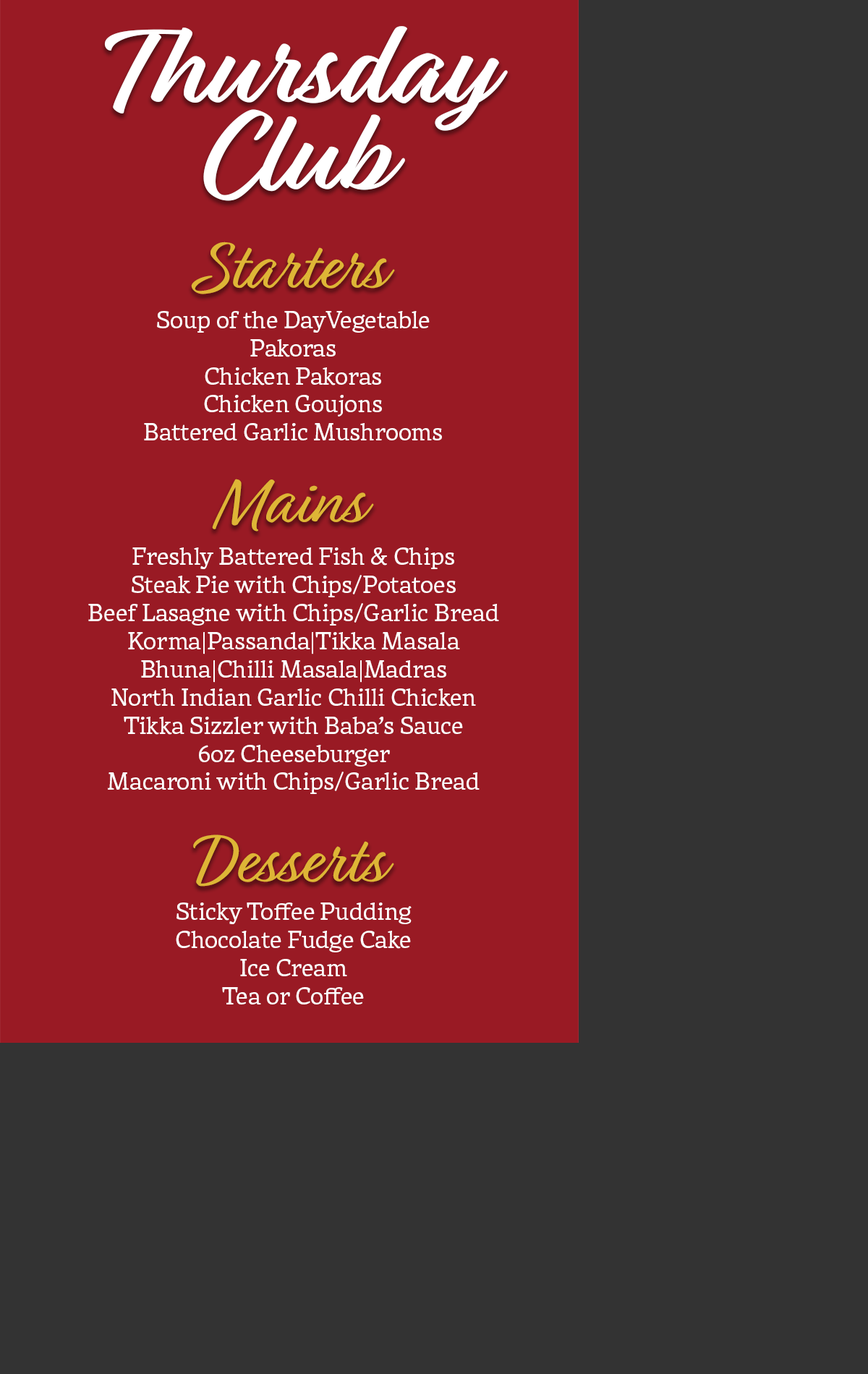
<style>
.page{position:relative;width:868px;height:1374px;background:#333333}
.page>*{position:absolute;margin:0}
.t1{font:120.5px/87px "Relation-Bold";color:#ffffff}
.t2{font:72.3px "Relation";color:#deb536}
.t3{font:5.8px/28.1px "Rival-Regular";color:#ffffff}
</style>
<div class="page">
<p class="t1" style="left:104px;top:26px;width:404px;height:175px;text-align:center">Thursday<br>Club</p>
<p class="t2" style="left:191px;top:242px;width:204px;height:52px">Starters</p>
<p class="t3" style="left:144px;top:311px;width:298px;height:129px;text-align:center">Soup of the DayVegetable Pakoras<br>Chicken Pakoras<br>Chicken Goujons<br>Battered Garlic Mushrooms</p>
<p class="t2" style="left:212px;top:479px;width:162px;height:53px">Mains</p>
<p class="t3" style="left:88px;top:547px;width:411px;height:247px;text-align:center">Freshly Battered Fish &amp; Chips<br>Steak Pie with Chips/Potatoes<br>Beef Lasagne with Chips/Garlic Bread<br>Korma|Passanda|Tikka Masala<br>Bhuna|Chilli Masala|Madras<br>North Indian Garlic Chilli Chicken<br>Tikka Sizzler with Baba’s Sauce<br>6oz Cheeseburger<br>Macaroni with Chips/Garlic Bread</p>
<p class="t2" style="left:193px;top:835px;width:201px;height:52px">Desserts</p>
<p class="t3" style="left:176px;top:903px;width:235px;height:102px;text-align:center">Sticky Toffee Pudding<br>Chocolate Fudge Cake<br>Ice Cream<br>Tea or Coffee</p>
</div>
